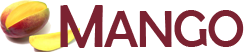
<style>
.page{position:relative;width:246px;height:52px;background:#ffffff}
.page>*{position:absolute;margin:0}
.t1{font:52px "BerlinSansFB-Reg";letter-spacing:-0.025em;color:#7b2231}
.t2{font:62px "BerlinSansFB-Reg";letter-spacing:-0.025em;color:#7b2231}
</style>
<div class="page">
<p class="t1" style="left:60px;top:5px;width:184px;height:43px"><span class="t2">M</span>ANGO</p>
</div>
